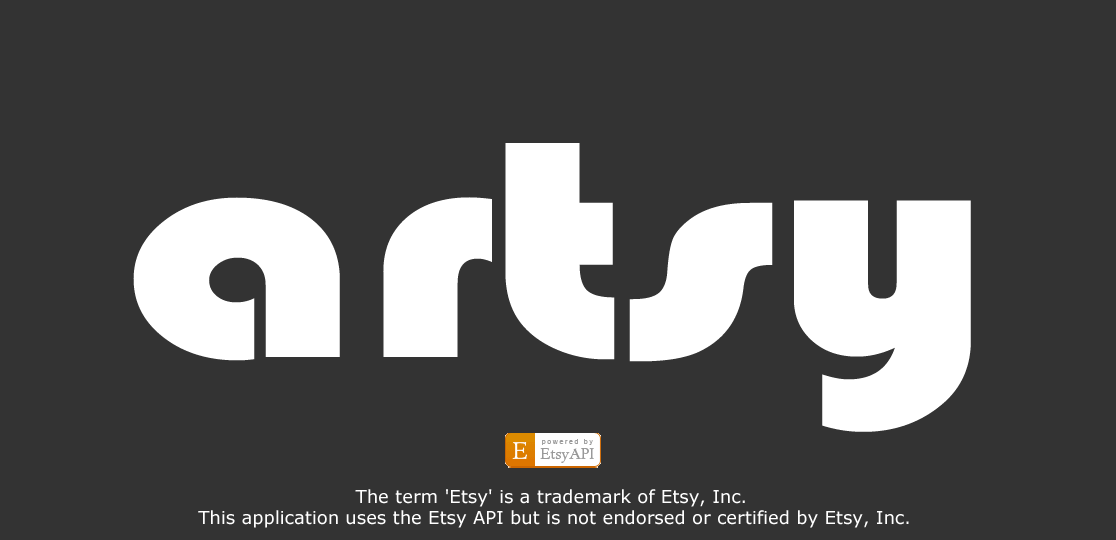
<style>
.page{position:relative;width:1116px;height:540px;background:#333333}
.page>*{position:absolute;margin:0}
.t1{font:320.7px "Bauhaus93";color:#ffffff;scale:1.26 1}
.t2{font:18px "Verdana";color:#ffffff}
</style>
<div class="page">
<p class="t1" style="left:133px;top:143px;width:838px;height:289px">artsy</p>
<p class="t2" style="left:198px;top:489px;width:711px;height:39px;text-align:center">The term 'Etsy' is a trademark of Etsy, Inc. <br>This application uses the Etsy API but is not endorsed or certified by Etsy, Inc.</p>
</div>
